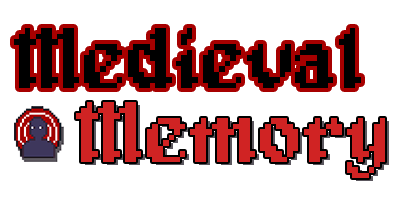
<style>
.page{position:relative;width:400px;height:200px;background:#ffffff}
.page>*{position:absolute;margin:0}
.t1{font:86.7px "Alagard";color:#000000}
.t2{font:86.7px "Alagard";color:#d02323}
</style>
<div class="page">
<p class="t1" style="left:14px;top:28px;width:347px;height:60px">Medieval</p>
<p class="t2" style="left:76px;top:102px;width:309px;height:76px">Memory</p>
</div>
